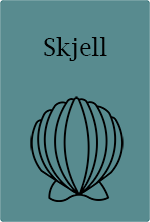
<style>
.page{position:relative;width:150px;height:222px;background:#588b8f}
.page>*{position:absolute;margin:0}
.t1{font:24px "LucidaBright";color:#000000}
.t2{font:36px "LucidaBright";color:#000000}
</style>
<div class="page">
<p class="t1" style="left:44px;top:37px;width:63px;height:24px"><span class="t2"><br></span>Skjell</p>
</div>
